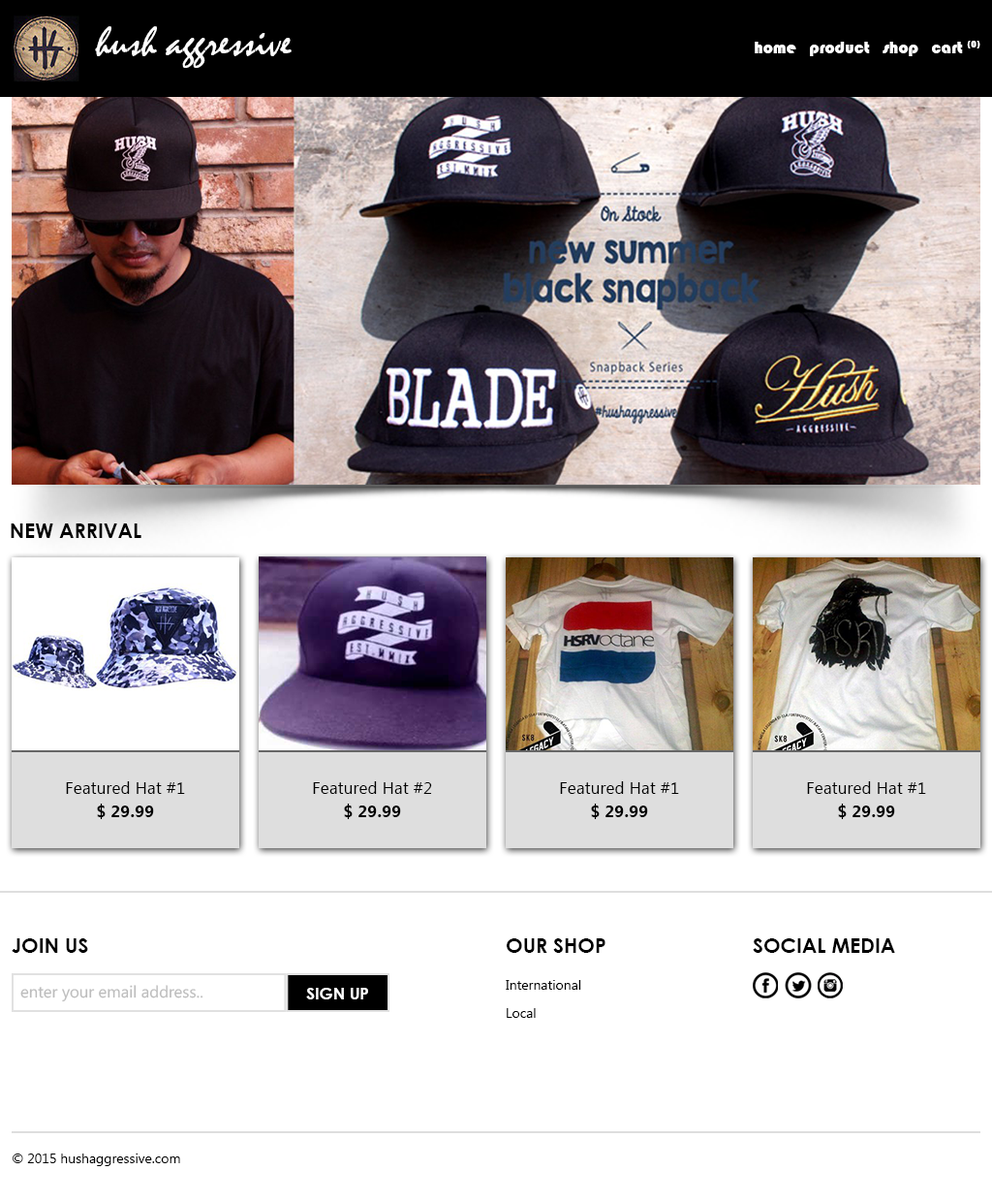
<style>
.page{position:relative;width:992px;height:1202px;background:#ffffff}
.page>*{position:absolute;margin:0}
.t1{font:42.1px "Mistral";color:#ffffff}
.t2{font:17.4px "Bauhaus93";color:#ffffff}
.t3{font:34.9px "CenturyGothic-Bold";color:#000000}
.t4{font:29.1px/23.3px "SegoeUI";color:#000000}
.t5{font:29.1px/23.3px "SegoeUI-Bold";color:#000000}
.t6{font:27.9px "SegoeUI";color:#bdbdbd}
.t7{font:27.9px "CenturyGothic-Bold";color:#ffffff}
.t8{font:23.3px "SegoeUI";color:#000000}
</style>
<div class="page">
<p class="t1" style="left:95px;top:26px;width:197px;height:42px">hush aggressive</p>
<p class="t2" style="left:755px;top:41px;width:226px;height:15px">home   product   shop   cart (0)</p>
<p class="t3" style="left:11px;top:523px;width:130px;height:15px">NEW ARRIVAL</p>
<p class="t4" style="left:66px;top:781px;width:119px;height:38px;text-align:center">Featured Hat #1<br><span class="t5">$ 29.99</span></p>
<p class="t4" style="left:313px;top:781px;width:119px;height:38px;text-align:center">Featured Hat #2<br><span class="t5">$ 29.99</span></p>
<p class="t4" style="left:560px;top:781px;width:119px;height:38px;text-align:center">Featured Hat #1<br><span class="t5">$ 29.99</span></p>
<p class="t4" style="left:807px;top:781px;width:119px;height:38px;text-align:center">Featured Hat #1<br><span class="t5">$ 29.99</span></p>
<p class="t3" style="left:12px;top:938px;width:76px;height:15px">JOIN US</p>
<p class="t3" style="left:507px;top:938px;width:99px;height:15px">OUR SHOP</p>
<p class="t3" style="left:753px;top:938px;width:142px;height:15px">SOCIAL MEDIA</p>
<p class="t6" style="left:20px;top:985px;width:184px;height:17px">enter your email address..</p>
<p class="t7" style="left:306px;top:987px;width:62px;height:12px">SIGN UP</p>
<p class="t8" style="left:506px;top:980px;width:75px;height:38px">International<br>Local</p>
<p class="t8" style="left:13px;top:1153px;width:167px;height:13px">© 2015 hushaggressive.com</p>
</div>
